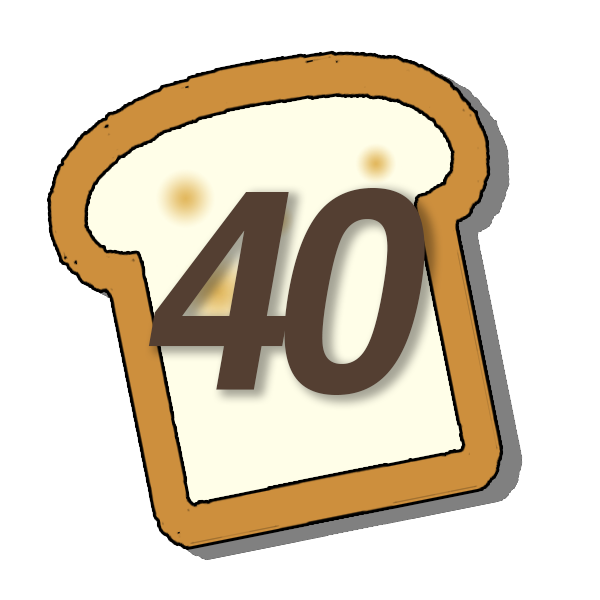
<style>
.page{position:relative;width:600px;height:600px;background:#ffffff}
.page>*{position:absolute;margin:0}
.t1{font:258.1px "H2gtrE";letter-spacing:-0.12em;color:#543f32;font-style:italic}
</style>
<div class="page">
<p class="t1" style="left:148px;top:188px;width:277px;height:207px">40</p>
</div>
